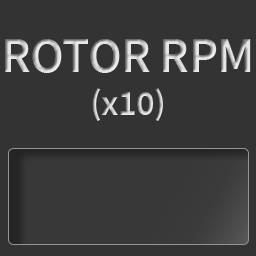
<style>
.page{position:relative;width:256px;height:256px;background:#333333}
.page>*{position:absolute;margin:0}
.t1{font:50px "SourceSansPro-SemiBold";letter-spacing:-0.01em}
.t2{font:36px "SourceSansPro-SemiBold";letter-spacing:-0.01em}
</style>
<div class="page">
<p class="t1" style="left:5px;top:39px;width:246px;height:82px;text-align:center">ROTOR RPM<br><span class="t2">(x10)</span></p>
</div>
